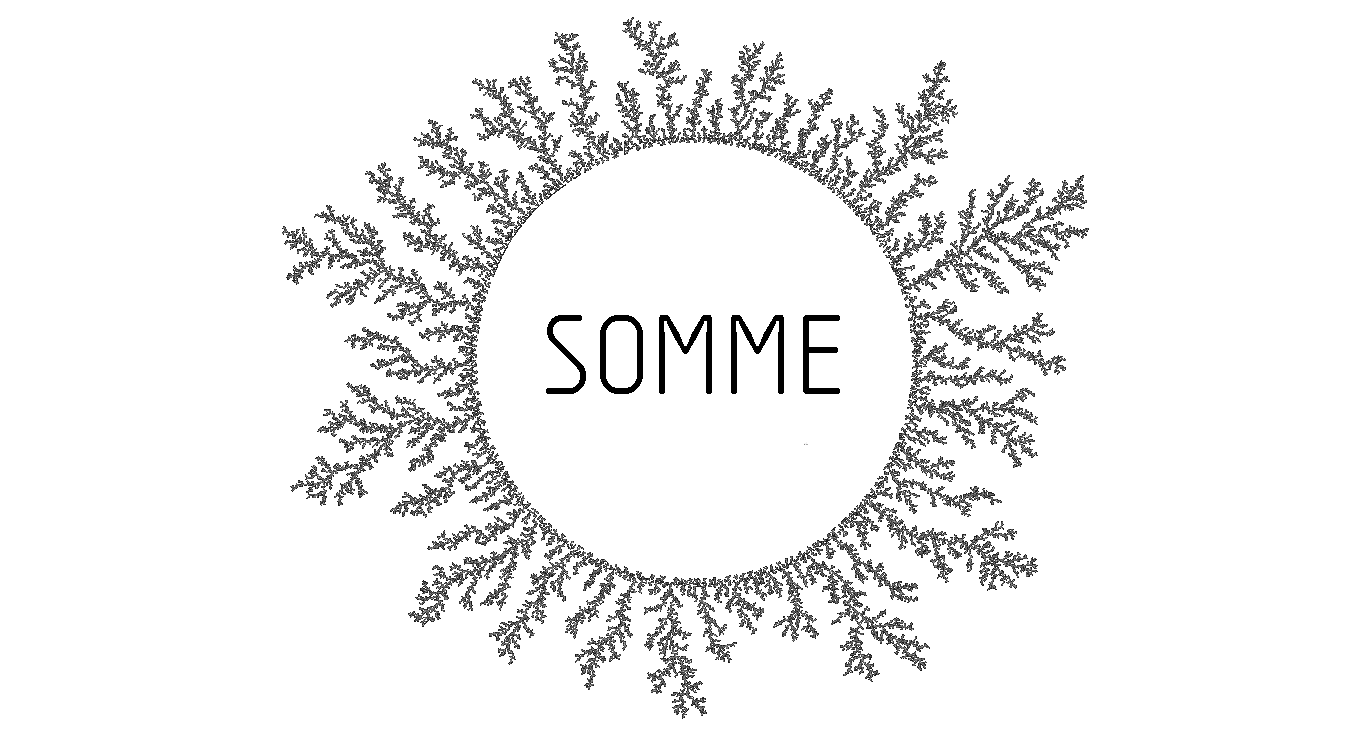
<style>
.page{position:relative;width:1366px;height:738px;background:#ffffff}
.page>*{position:absolute;margin:0}
.t1{font:109.9px "SysTT";color:#000000;scale:0.92 1}
</style>
<div class="page">
<p class="t1" style="left:546px;top:315px;width:294px;height:79px">SOMME</p>
</div>
